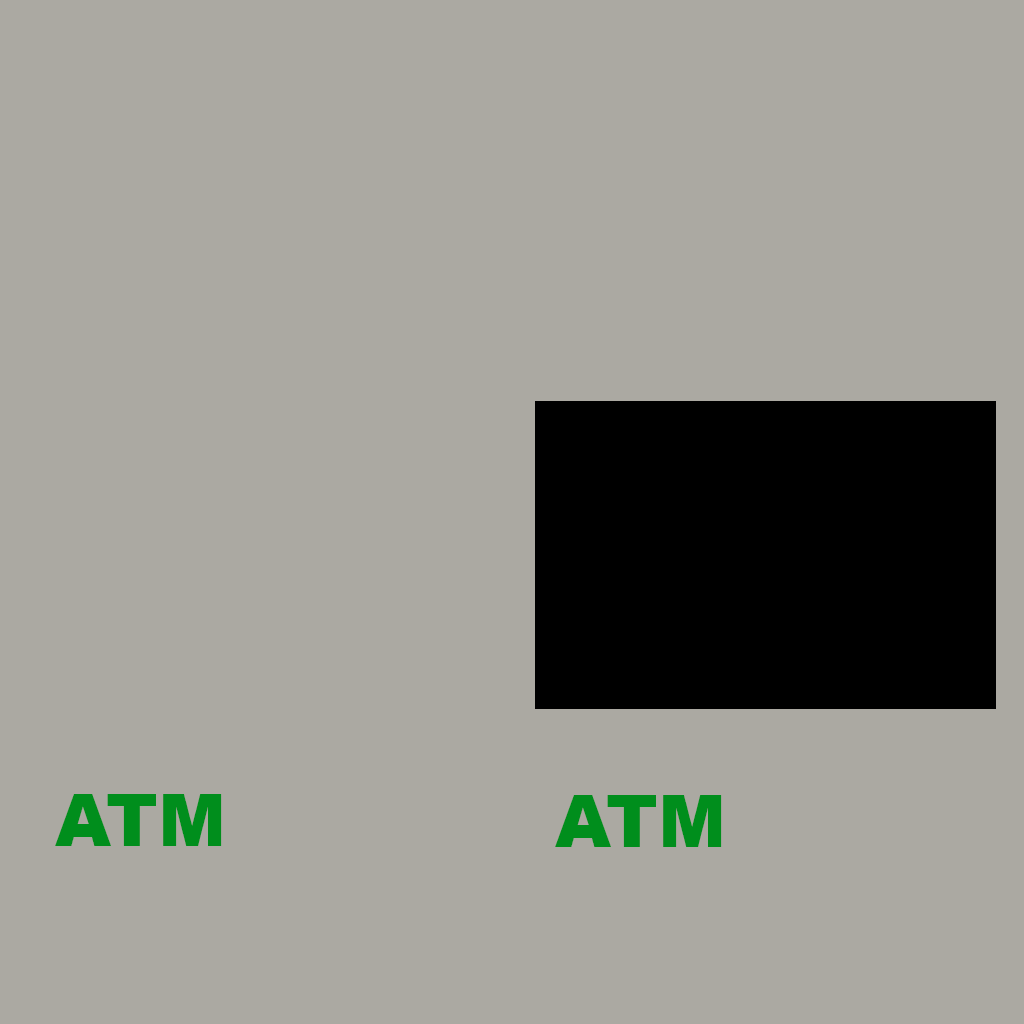
<style>
.page{position:relative;width:1024px;height:1024px;background:#aba9a2}
.page>*{position:absolute;margin:0}
.t1{font:72px "Arial-Black";color:#008e1c}
</style>
<div class="page">
<p class="t1" style="left:55px;top:794px;width:167px;height:52px">ATM</p>
<p class="t1" style="left:555px;top:795px;width:167px;height:52px">ATM</p>
</div>
